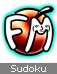
<style>
.page{position:relative;width:57px;height:74px;background:#ffffff}
.page>*{position:absolute;margin:0}
.t1{font:16px "MozartNBP";color:#f3f2f2}
</style>
<div class="page">
<p class="t1" style="left:11px;top:65px;width:35px;height:7px">Sudoku</p>
</div>
